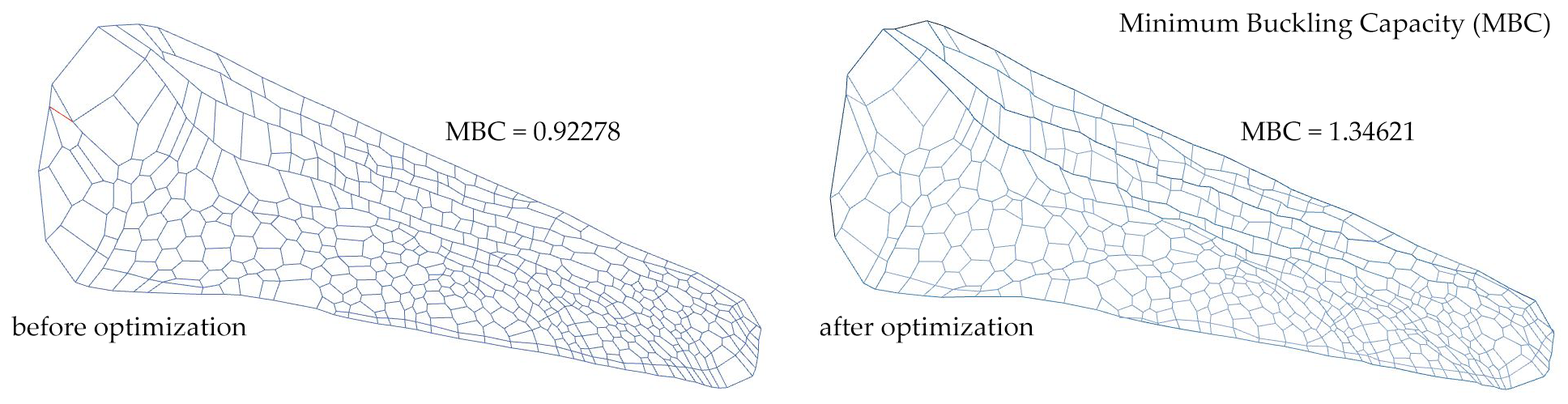
<style>
.page{position:relative;width:1568px;height:404px;background:#ffffff}
.page>*{position:absolute;margin:0}
.t1{font:27px "PalatinoLinotype-Roman";color:#000000}
</style>
<div class="page">
<p class="t1" style="left:1119px;top:12px;width:431px;height:28px">Minimum Buckling Capacity (MBC)</p>
<p class="t1" style="left:445px;top:121px;width:175px;height:20px">MBC = 0.92278</p>
<p class="t1" style="left:1241px;top:121px;width:173px;height:20px">MBC = 1.34621</p>
<p class="t1" style="left:11px;top:316px;width:236px;height:27px">before optimization</p>
<p class="t1" style="left:820px;top:316px;width:214px;height:27px">after optimization</p>
</div>
